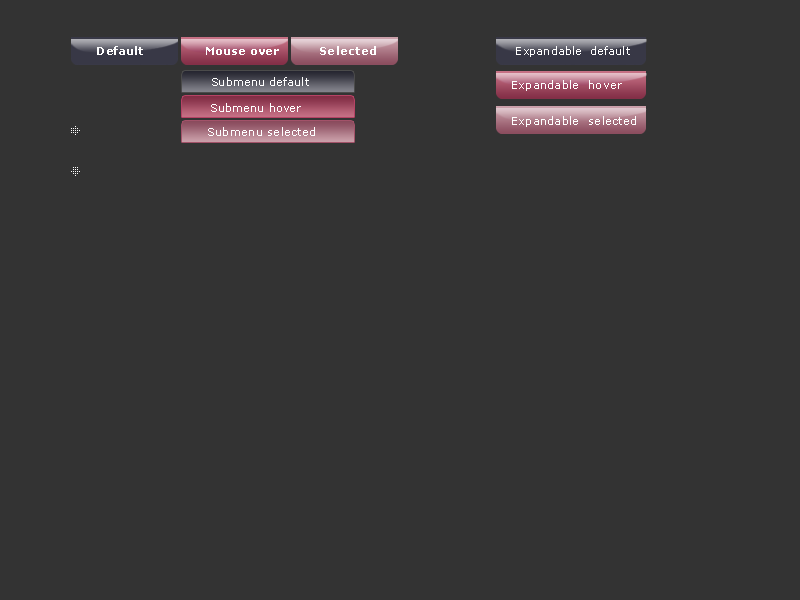
<style>
.page{position:relative;width:800px;height:600px;background:#333333}
.page>*{position:absolute;margin:0}
.t1{font:11px "Verdana-Bold";letter-spacing:0.025em;color:#ffffff}
.t2{font:11px "Verdana";letter-spacing:0.025em;color:#ffffff}
</style>
<div class="page">
<p class="t1" style="left:97px;top:46px;width:46px;height:9px">Default</p>
<p class="t1" style="left:206px;top:47px;width:73px;height:8px">Mouse over</p>
<p class="t1" style="left:320px;top:46px;width:56px;height:9px">Selected</p>
<p class="t2" style="left:516px;top:46px;width:114px;height:11px">Expandable  default</p>
<p class="t2" style="left:212px;top:77px;width:97px;height:9px">Submenu default</p>
<p class="t2" style="left:512px;top:80px;width:110px;height:11px">Expandable  hover</p>
<p class="t2" style="left:211px;top:103px;width:90px;height:9px">Submenu hover</p>
<p class="t2" style="left:512px;top:116px;width:124px;height:11px">Expandable  selected</p>
<p class="t2" style="left:208px;top:127px;width:107px;height:9px">Submenu selected</p>
</div>
